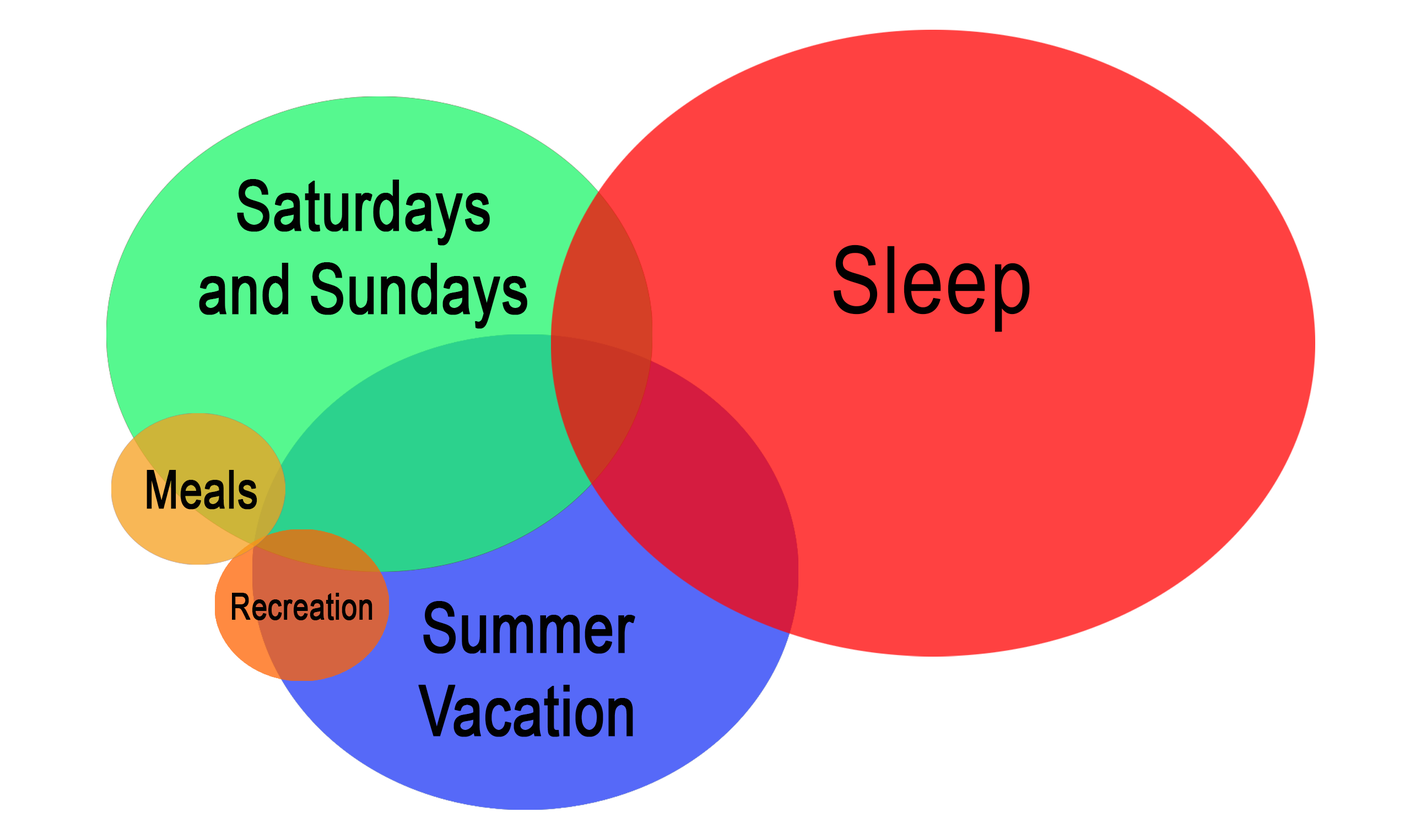
<style>
.page{position:relative;width:1421px;height:839px;background:#ffffff}
.page>*{position:absolute;margin:0}
.t1{font:70.5px "ArialMT";color:#010101;font-weight:bold;scale:0.77 1}
.t2{font:92.9px "ArialMT";color:#010101;font-weight:bold;scale:0.82 1}
.t3{font:53.1px "ArialMT";color:#010101;font-weight:bold;scale:0.77 1}
.t4{font:36.7px "ArialMT";color:#010101;font-weight:bold;scale:0.77 1}
</style>
<div class="page">
<p class="t1" style="left:199px;top:179px;width:328px;height:150px;text-align:center">Saturdays<br>and Sundays</p>
<p class="t2" style="left:834px;top:245px;width:196px;height:87px">Sleep</p>
<p class="t3" style="left:147px;top:470px;width:110px;height:40px">Meals</p>
<p class="t4" style="left:232px;top:593px;width:140px;height:27px">Recreation</p>
<p class="t1" style="left:418px;top:601px;width:217px;height:136px;text-align:center">Summer<br>Vacation</p>
</div>
